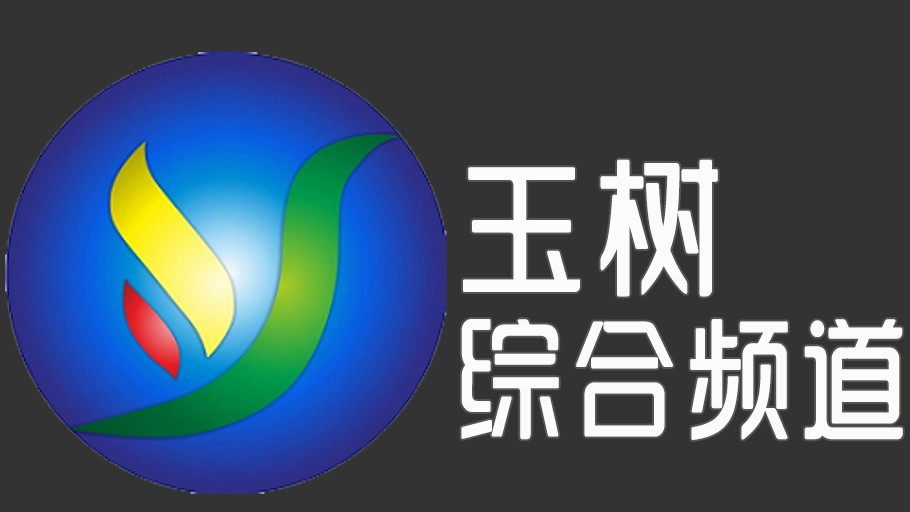
<style>
.page{position:relative;width:910px;height:512px;background:#333333}
.page>*{position:absolute;margin:0}
.t1{font:132px/160px "SJyunlvyuan";letter-spacing:0.02em;color:#fcfbf9;scale:0.85 1}
.t2{font:150px/160px "SJyunlvyuan";letter-spacing:0.02em;color:#fcfbf9;scale:0.9 1}
</style>
<div class="page">
<p class="t1" style="left:461px;top:159px;width:442px;height:281px"><span class="t2">玉树<br></span>综合频道</p>
</div>
